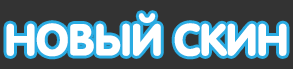
<style>
.page{position:relative;width:293px;height:69px;background:#333333}
.page>*{position:absolute;margin:0}
.t1{font:44px "VAGWorld-Bold";color:#ffffff}
</style>
<div class="page">
<p class="t1" style="left:6px;top:13px;width:281px;height:44px">НОВЫЙ СКИН</p>
</div>
